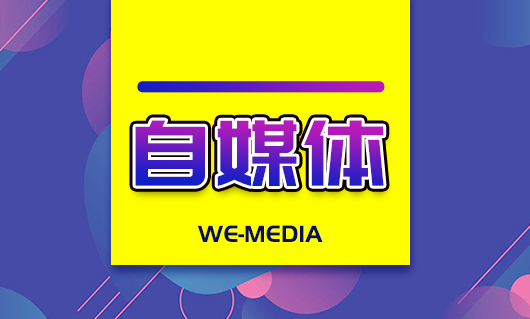
<style>
.page{position:relative;width:530px;height:319px;background:#454ba7}
.page>*{position:absolute;margin:0}
.t1{font:90.5px "PangMenZhengDao"}
.t2{font:24.5px "PangMenZhengDao";color:#0a0f5d;text-transform:uppercase}
</style>
<div class="page">
<p class="t1" style="left:135px;top:120px;width:249px;height:66px">自媒体</p>
<p class="t2" style="left:197px;top:225px;width:126px;height:17px">We-Media</p>
</div>
